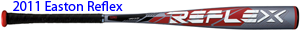
<style>
.page{position:relative;width:300px;height:31px;background:#ffffff}
.page>*{position:absolute;margin:0}
.t1{font:14px "MyriadPro-Regular";color:#0000ff}
</style>
<div class="page">
<p class="t1" style="left:13px;top:1px;width:110px;height:10px">2011 Easton Reflex</p>
</div>
